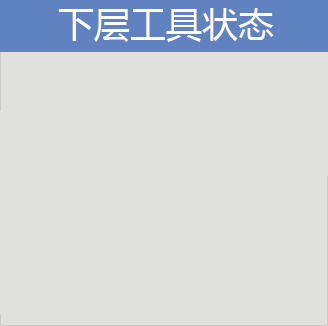
<style>
.page{position:relative;width:328px;height:326px;background:#e0e0df}
.page>*{position:absolute;margin:0}
.t1{font:36px "MicrosoftYaHei";color:#ffffff}
</style>
<div class="page">
<p class="t1" style="left:58px;top:8px;width:216px;height:34px">下层工具状态</p>
</div>
